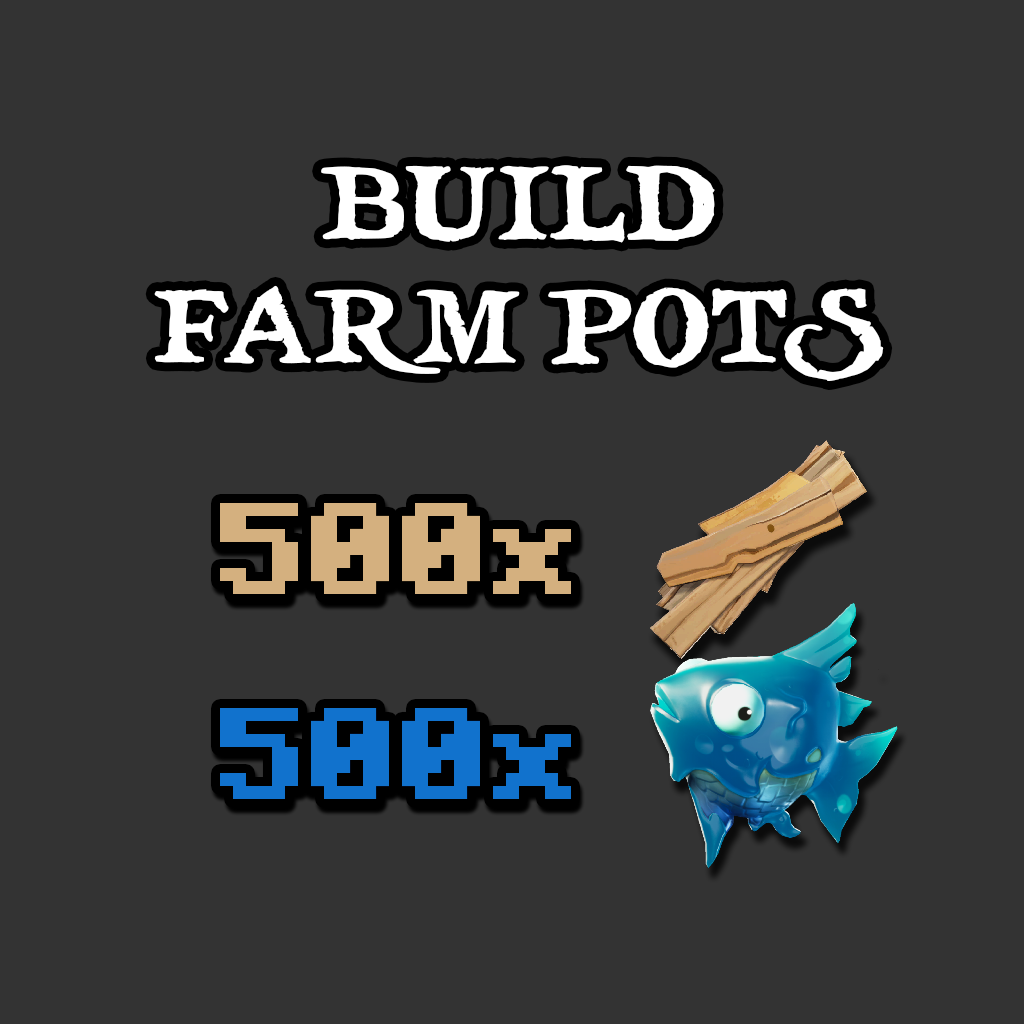
<style>
.page{position:relative;width:1024px;height:1024px;background:#333333}
.page>*{position:absolute;margin:0}
.t1{font:103.6px "treasuremap";color:#ffffff}
.t2{font:130px "Minecraft-Bold";color:#d4b07f}
.t3{font:130px "Minecraft-Bold";color:#1172cd}
</style>
<div class="page">
<p class="t1" style="left:154px;top:165px;width:730px;height:216px;text-align:center">BUILD <br>FARM POTS</p>
<p class="t2" style="left:220px;top:503px;width:351px;height:91px">500x</p>
<p class="t3" style="left:220px;top:708px;width:351px;height:91px">500x</p>
</div>
